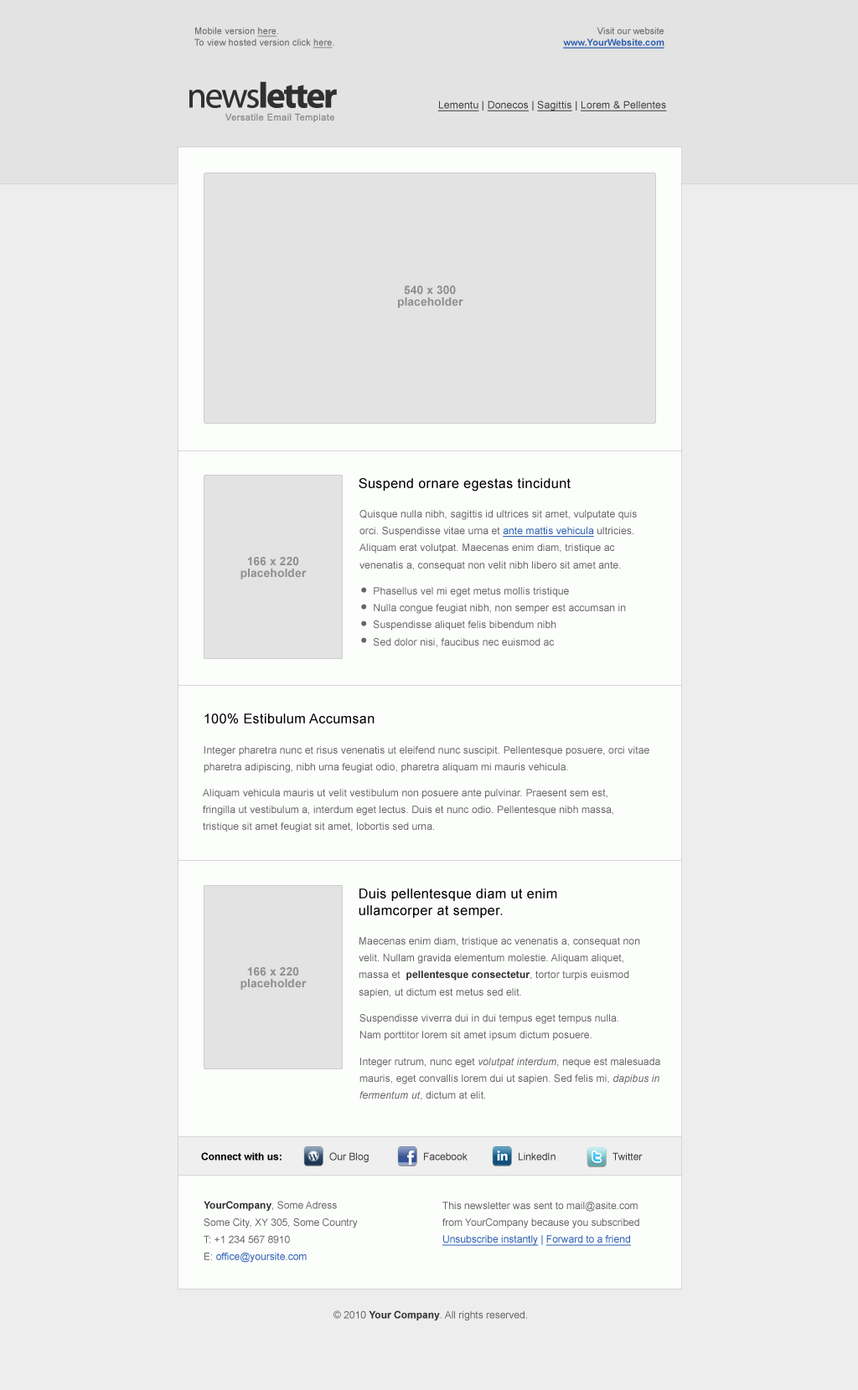
<style>
.page{position:relative;width:858px;height:1390px;background:#ededed}
.page>*{position:absolute;margin:0}
.t1{font:9.2px/11.5px "ArialMT";letter-spacing:0.01em;color:#666666}
.t2{font:9.2px/11.5px "ArialMT";letter-spacing:0.01em;color:#666666;text-decoration:underline}
.t3{font:9.2px/11.5px "Arial-BoldMT";color:#2a5db0;text-decoration:underline}
.t4{font:9.2px/11.5px "ArialMT";color:#666666}
.t5{font:36px "MyriadPro-Bold";letter-spacing:-0.05em;color:#303030}
.t6{font:36px "MyriadPro-Regular";letter-spacing:-0.05em;color:#303030}
.t7{font:10.1px "ArialMT";letter-spacing:0.02em;color:#3a3a3a;text-decoration:underline}
.t8{font:10.1px "ArialMT";letter-spacing:0.02em;color:#3a3a3a}
.t9{font:9.2px "ArialMT";letter-spacing:0.04em;color:#8b8b8b}
.t10{font:13.4px "ArialMT";letter-spacing:0.03em;color:#000000}
.t11{font:10.1px/17.1px "ArialMT";letter-spacing:0.01em;color:#666666}
.t12{font:10.1px/17.1px "ArialMT";letter-spacing:0.01em;color:#2a5db0;text-decoration:underline}
.t13{font:13.4px/16.8px "ArialMT";letter-spacing:0.03em;color:#000000}
.t14{font:10.1px/17.1px "Arial-BoldMT";letter-spacing:0.01em;color:#333333}
.t15{font:10.1px/17.1px "Arial-ItalicMT";letter-spacing:0.01em;color:#666666}
.t16{font:10.1px "Arial-BoldMT";color:#000000}
.t17{font:10.1px "ArialMT";color:#3a3a3a}
.t18{font:10.1px/17.1px "ArialMT";color:#666666}
.t19{font:10.1px/17.1px "Arial-BoldMT";color:#333333}
.t20{font:10.1px/17.1px "ArialMT";color:#2a5db0}
.t21{font:10.1px/17.1px "ArialMT";color:#2a5db0;text-decoration:underline}
.t22{font:10.1px "ArialMT";color:#666666}
.t23{font:10.1px "Arial-BoldMT";color:#333333}
</style>
<div class="page">
<p class="t1" style="left:194px;top:27px;width:140px;height:22px">Mobile version <span class="t2">here</span>.<br>To view hosted version click <span class="t2">here</span>.</p>
<p class="t3" style="left:563px;top:27px;width:101px;height:22px;text-align:right"><span class="t4">Visit our website<br></span>www.YourWebsite.com</p>
<p class="t5" style="left:188px;top:81px;width:149px;height:27px"><span class="t6">news</span>letter</p>
<p class="t7" style="left:437px;top:101px;width:230px;height:10px">Lementu<span class="t8"> | </span>Donecos<span class="t8"> | </span>Sagittis<span class="t8"> | </span>Lorem &amp; Pellentes</p>
<p class="t9" style="left:225px;top:113px;width:109px;height:9px">Versatile Email Template</p>
<p class="t10" style="left:358px;top:478px;width:212px;height:14px">Suspend ornare egestas tincidunt</p>
<p class="t11" style="left:359px;top:510px;width:278px;height:61px">Quisque nulla nibh, sagittis id ultrices sit amet, vulputate quis <br>orci. Suspendisse vitae urna et <span class="t12">ante mattis vehicula</span> ultricies.<br>Aliquam erat volutpat. Maecenas enim diam, tristique ac <br>venenatis a, consequat non velit nibh libero sit amet ante.</p>
<p class="t11" style="left:373px;top:587px;width:253px;height:60px">Phasellus vel mi eget metus mollis tristique<br>     Nulla congue feugiat nibh, non semper est accumsan in<br>     Suspendisse aliquet felis bibendum nibh<br>     Sed dolor nisi, faucibus nec euismod ac</p>
<p class="t10" style="left:204px;top:714px;width:170px;height:10px">100% Estibulum Accumsan</p>
<p class="t11" style="left:204px;top:746px;width:445px;height:27px">Integer pharetra nunc et risus venenatis ut eleifend nunc suscipit. Pellentesque posuere, orci vitae <br>pharetra adipiscing, nibh urna feugiat odio, pharetra aliquam mi mauris vehicula.</p>
<p class="t11" style="left:203px;top:789px;width:410px;height:44px">Aliquam vehicula mauris ut velit vestibulum non posuere ante pulvinar. Praesent sem est, <br>fringilla ut vestibulum a, interdum eget lectus. Duis et nunc odio. Pellentesque nibh massa, <br>tristique sit amet feugiat sit amet, lobortis sed urna.</p>
<p class="t13" style="left:358px;top:889px;width:199px;height:29px">Duis pellentesque diam ut enim<br>ullamcorper at semper.</p>
<p class="t11" style="left:358px;top:937px;width:282px;height:61px">Maecenas enim diam, tristique ac venenatis a, consequat non <br>velit. Nullam gravida elementum molestie. Aliquam aliquet, <br>massa et  <span class="t14">pellentesque consectetur</span>, tortor turpis euismod <br>sapien, ut dictum est metus sed elit.</p>
<p class="t11" style="left:359px;top:1014px;width:259px;height:27px">Suspendisse viverra dui in dui tempus eget tempus nulla.<br>Nam porttitor lorem sit amet ipsum dictum posuere.</p>
<p class="t11" style="left:359px;top:1058px;width:301px;height:43px">Integer rutrum, nunc eget <span class="t15">volutpat interdum</span>, neque est malesuada <br>mauris, eget convallis lorem dui ut sapien. Sed felis mi, <span class="t15">dapibus in <br>fermentum ut</span>, dictum at elit.</p>
<p class="t16" style="left:201px;top:1152px;width:80px;height:9px">Connect with us:</p>
<p class="t17" style="left:329px;top:1152px;width:40px;height:11px">Our Blog</p>
<p class="t17" style="left:424px;top:1152px;width:43px;height:9px">Facebook</p>
<p class="t17" style="left:518px;top:1152px;width:37px;height:9px">LinkedIn</p>
<p class="t17" style="left:612px;top:1152px;width:30px;height:9px">Twitter</p>
<p class="t18" style="left:204px;top:1201px;width:154px;height:62px"><span class="t19">YourCompany</span>, Some Adress<br>Some City, XY 305, Some Country<br>T: +1 234 567 8910<br>E: <span class="t20">office@yoursite.com</span></p>
<p class="t18" style="left:442px;top:1202px;width:197px;height:44px">This newsletter was sent to mail@asite.com<br>from YourCompany because you subscribed<br><span class="t21">Unsubscribe instantly</span><span class="t20"> | </span><span class="t21">Forward to a friend</span></p>
<p class="t22" style="left:333px;top:1311px;width:194px;height:10px">© 2010 <span class="t23">Your Company</span>. All rights reserved.</p>
</div>
